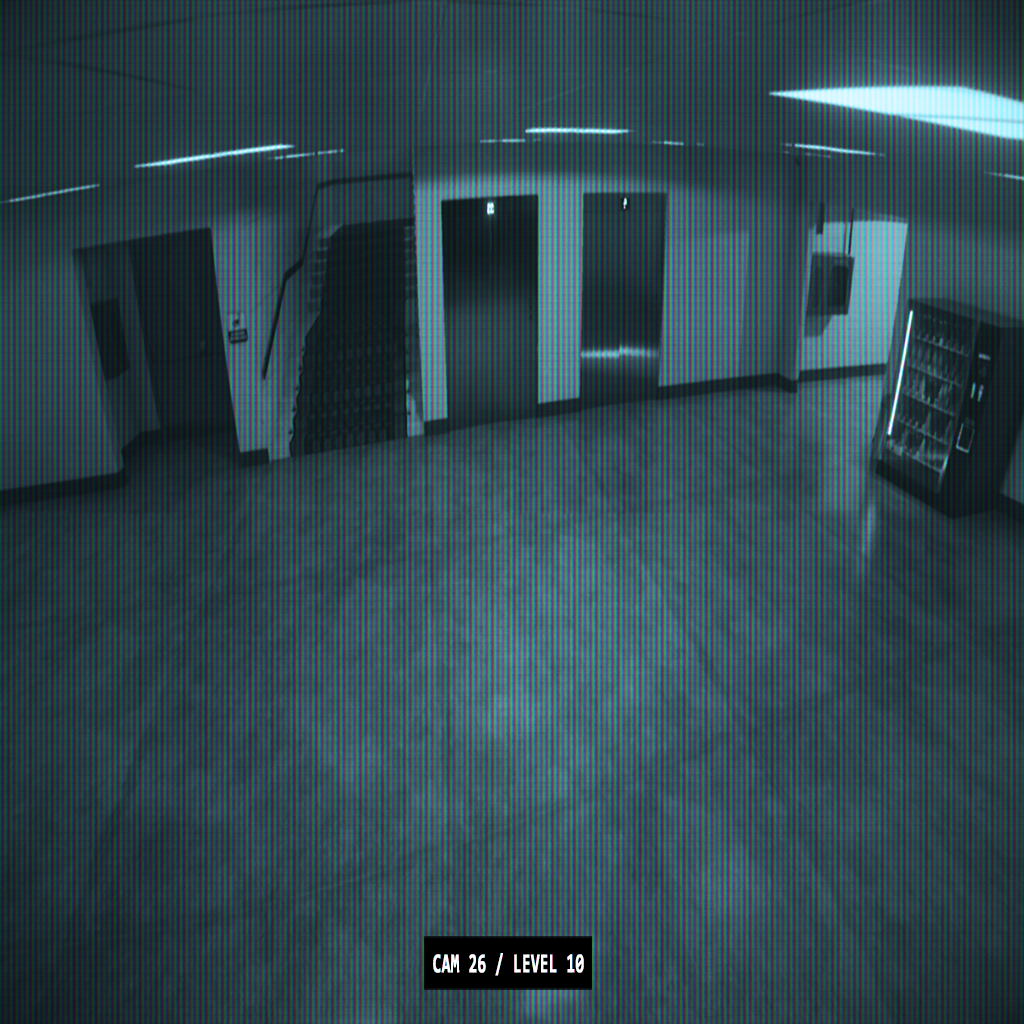
<style>
.page{position:relative;width:1024px;height:1024px}
.page>*{position:absolute;margin:0}
.t1{font:27.5px "Consolas-Bold";color:#ffffff;font-weight:bold;scale:0.56 1}
</style>
<div class="page">
<p class="t1" style="left:433px;top:953px;width:151px;height:23px">CAM 26 / LEVEL 10</p>
</div>
